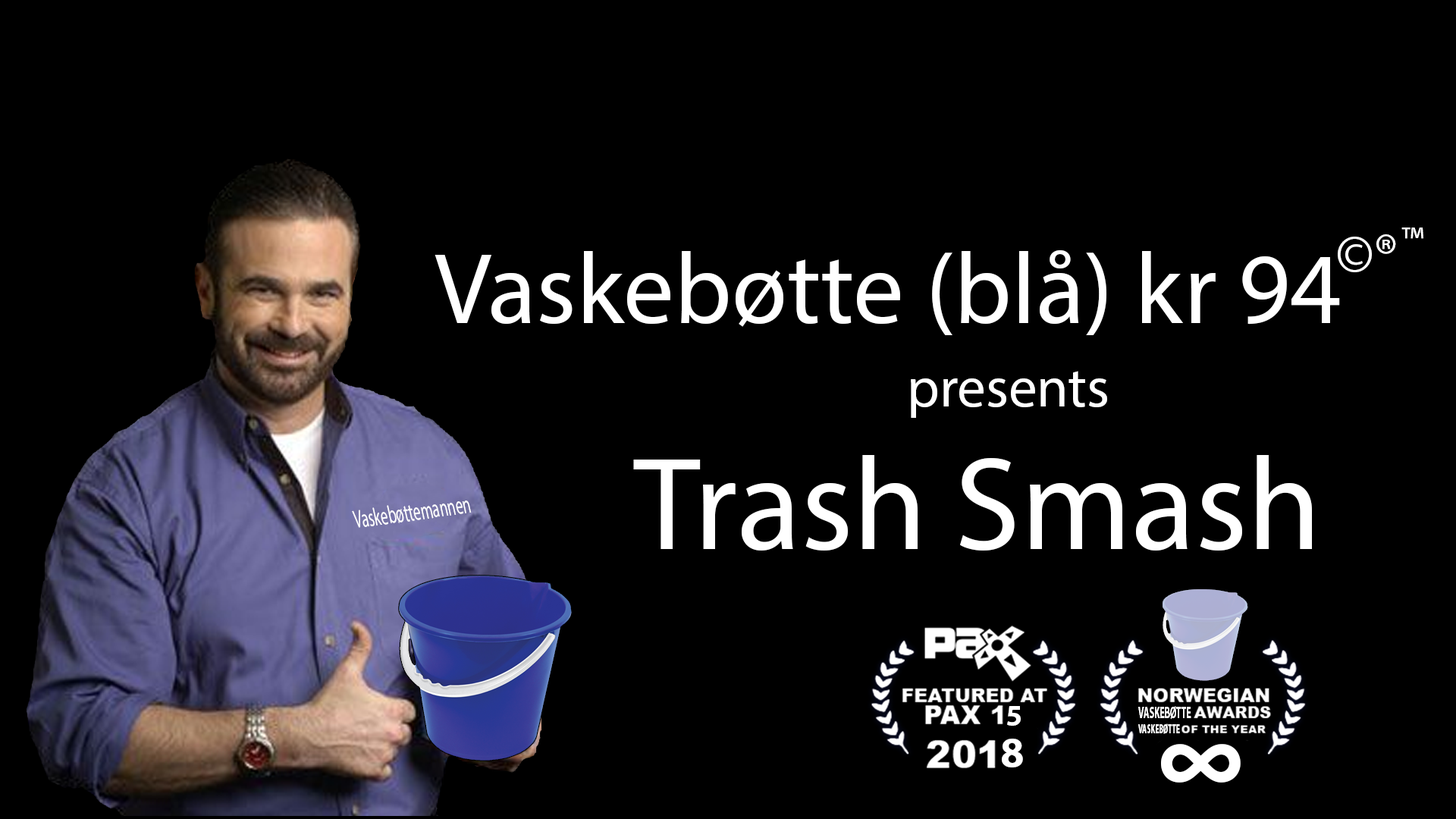
<style>
.page{position:relative;width:1456px;height:819px;background:#000000}
.page>*{position:absolute;margin:0}
.t1{font:37.9px "MyriadPro-Regular";color:#ffffff}
.t2{font:56.9px "MyriadPro-Regular";color:#ffffff}
.t3{font:101.1px "MyriadPro-Regular";color:#ffffff}
.t4{font:132.7px "MyriadPro-Regular";color:#ffffff}
.t5{font:25.3px "MyriadPro-Regular";color:#ffffff;scale:0.57 1}
.t6{font:16.4px "MyriadPro-Bold";color:#ffffff;scale:0.55 1}
.t7{font:13.1px "MyriadPro-Bold";color:#ffffff;scale:0.54 1}
.t8{font:43.2px "MyriadPro-Bold";color:#ffffff}
.t9{font:113.7px "MyriadPro-Bold";color:#ffffff}
</style>
<div class="page">
<p class="t1" style="left:1401px;top:227px;width:22px;height:12px">™</p>
<p class="t2" style="left:1338px;top:234px;width:58px;height:38px">©®</p>
<p class="t3" style="left:435px;top:250px;width:905px;height:85px">Vaskebøtte (blå) kr 94</p>
<p class="t2" style="left:911px;top:371px;width:196px;height:47px">presents</p>
<p class="t4" style="left:633px;top:455px;width:679px;height:96px">Trash Smash</p>
<p class="t5" style="left:352px;top:500px;width:120px;height:28px;rotate:-8deg">Vaskebøttemannen</p>
<p class="t6" style="left:1138px;top:706px;width:53px;height:14px">VASKEBØTTE</p>
<p class="t7" style="left:1138px;top:723px;width:42px;height:11px">VASKEBØTTE</p>
<p class="t8" style="left:1002px;top:739px;width:21px;height:28px">8</p>
<p class="t9" style="left:1161px;top:744px;width:80px;height:39px">∞</p>
</div>
